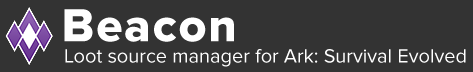
<style>
.page{position:relative;width:473px;height:72px;background:#333333}
.page>*{position:absolute;margin:0}
.t1{font:48px "ProximaNova-Extrabld";letter-spacing:0.04em;color:#ffffff}
.t2{font:20px "ProximaNova-Regular";color:#ffffff}
</style>
<div class="page">
<p class="t1" style="left:64px;top:9px;width:170px;height:33px">Beacon</p>
<p class="t2" style="left:65px;top:49px;width:401px;height:18px">Loot source manager for Ark: Survival Evolved</p>
</div>
